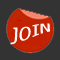
<style>
.page{position:relative;width:60px;height:60px;background:#333333}
.page>*{position:absolute;margin:0}
.t1{font:16.7px "Verdana";color:#fcf8f7}
</style>
<div class="page">
<p class="t1" style="left:10px;top:23px;width:40px;height:22px">JOIN</p>
</div>
